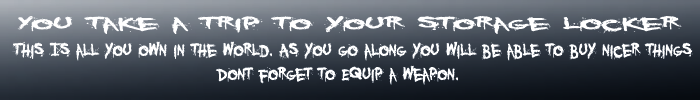
<style>
.page{position:relative;width:700px;height:100px}
.page>*{position:absolute;margin:0}
.t1{font:25px "YouMurdererBB";color:#ffffff;scale:2.19 1}
.t2{font:25px "YouMurdererBB";color:#ffffff}
</style>
<div class="page">
<p class="t1" style="left:17px;top:16px;width:665px;height:18px">You take a trip to your storage locker</p>
<p class="t2" style="left:12px;top:41px;width:681px;height:20px">This Is all you own in the world. As you go along you will be able to buy nicer things</p>
<p class="t2" style="left:215px;top:65px;width:243px;height:20px">Dont forget to Equip a weapon.</p>
</div>
